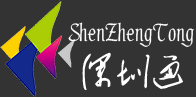
<style>
.page{position:relative;width:196px;height:97px;background:#333333}
.page>*{position:absolute;margin:0}
.t1{font:26px "FZXZTFW--GB1-0";color:#ffffff}
.t2{font:12px "²ÝÌ´Õ«Ã«Ôó¶«×ÖÌå";color:#000000}
.t3{font:37px "²ÝÌ´Õ«Ã«Ôó¶«×ÖÌå";color:#ffffff}
</style>
<div class="page">
<p class="t1" style="left:68px;top:22px;width:126px;height:25px"><span class="t2"> </span>ShenZhengTong</p>
<p class="t3" style="left:82px;top:52px;width:101px;height:38px">深圳通</p>
</div>
